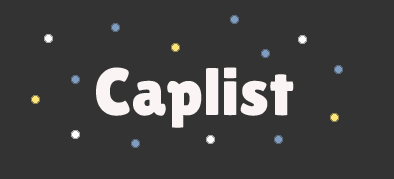
<style>
.page{position:relative;width:394px;height:179px;background:#333333}
.page>*{position:absolute;margin:0}
.t1{font:67px "LilitaOne";color:#faf4f4}
</style>
<div class="page">
<p class="t1" style="left:96px;top:67px;width:198px;height:61px">Caplist</p>
</div>
